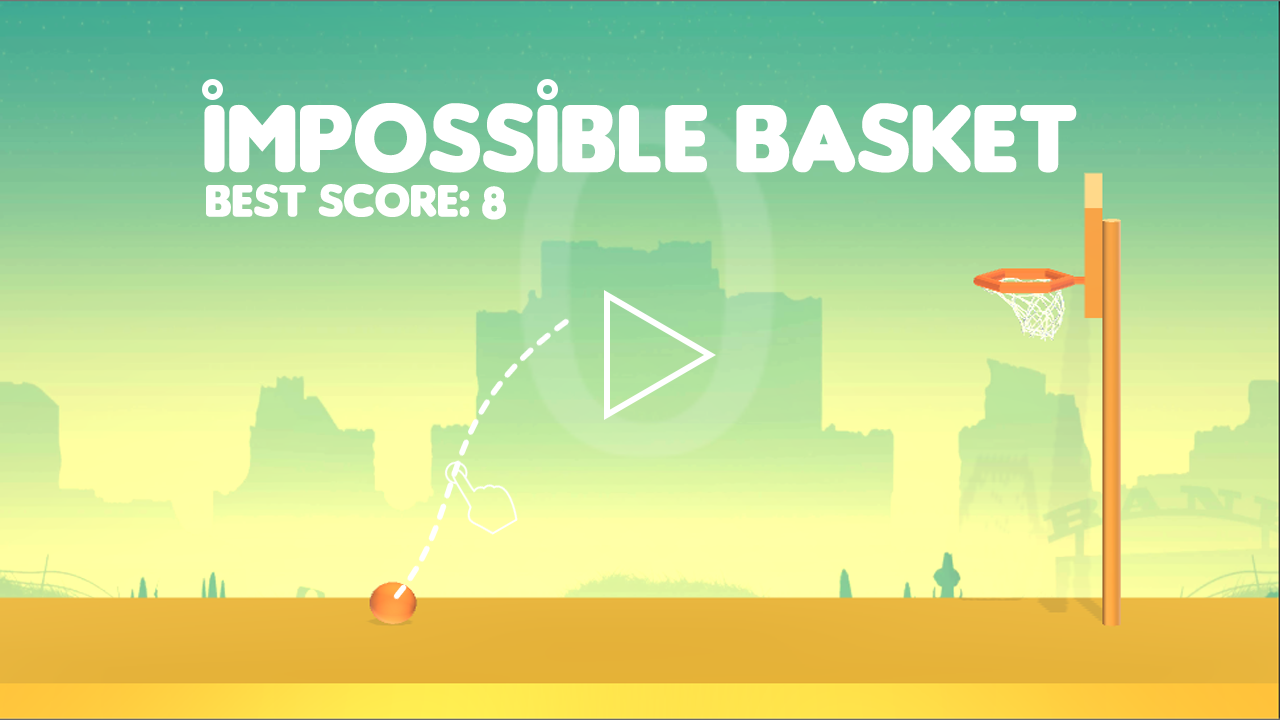
<style>
.page{position:relative;width:1280px;height:720px}
.page>*{position:absolute;margin:0}
.t1{font:102px "Insaniburger";color:#ffffff}
.t2{font:48px "Insaniburger";color:#ffffff}
</style>
<div class="page">
<p class="t1" style="left:204px;top:103px;width:873px;height:70px">Impossible BaskeT</p>
<p class="t2" style="left:206px;top:184px;width:252px;height:33px">Best Score</p>
<p class="t2" style="left:459px;top:190px;width:11px;height:27px">:</p>
<p class="t2" style="left:482px;top:186px;width:24px;height:34px">8</p>
</div>
